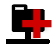
<style>
.page{position:relative;width:54px;height:47px;background:#ffffff}
.page>*{position:absolute;margin:0}
.t1{font:59.9px "CenturyGothic-Bold";letter-spacing:0.03em;color:#ce0000}
</style>
<div class="page">
<p class="t1" style="left:22px;top:9px;width:30px;height:29px">+</p>
</div>
